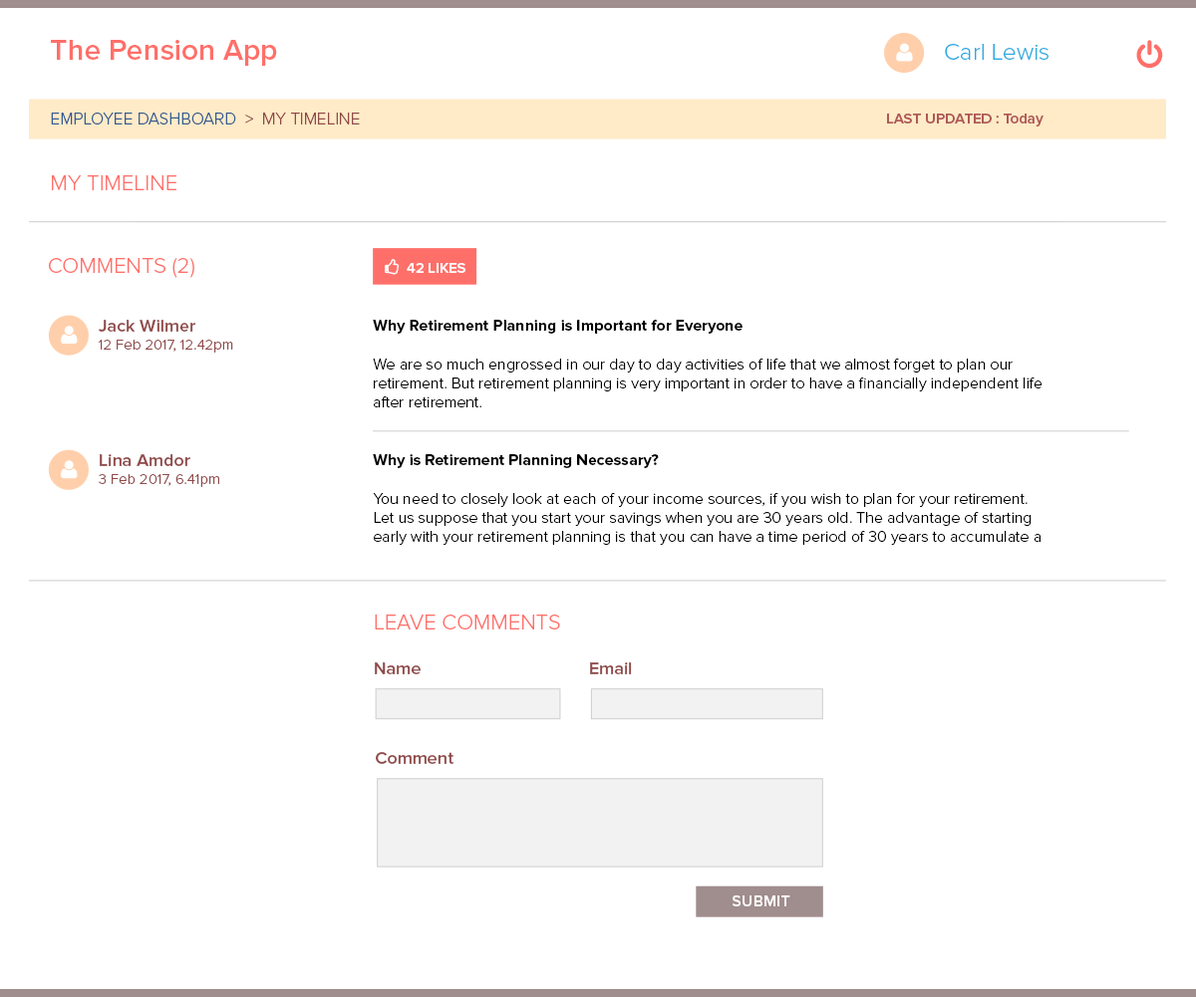
<style>
.page{position:relative;width:1196px;height:997px;background:#ffffff}
.page>*{position:absolute;margin:0}
.t1{font:29.9px "ProximaNova-Semibold";color:#ff6f69}
.t2{font:23.9px "ProximaNova-Light";color:#29abe2}
.t3{font:16.9px "ProximaNova-Light";color:#345b94}
.t4{font:16.9px "ProximaNova-Light";color:#914a4a}
.t5{font:14.9px "ProximaNova-Semibold";color:#af5858}
.t6{font:21.9px "ProximaNova-Light";color:#ff6f69}
.t7{font:14.9px "ProximaNova-Semibold";color:#ffffff}
.t8{font:17.9px "ProximaNova-Semibold";color:#914a4a}
.t9{font:15.9px "ProximaNova-Light";color:#000000}
.t10{font:15.9px "ProximaNova-Bold";color:#000000}
.t11{font:14.9px "ProximaNova-Light";color:#914a4a}
.t12{font:15.9px "ProximaNova-Semibold";color:#ffffff}
</style>
<div class="page">
<p class="t1" style="left:51px;top:40px;width:226px;height:26px">The Pension App</p>
<p class="t2" style="left:945px;top:44px;width:103px;height:16px">Carl Lewis</p>
<p class="t3" style="left:51px;top:113px;width:309px;height:12px">EMPLOYEE DASHBOARD<span class="t4">  &gt;  MY TIMELINE</span></p>
<p class="t5" style="left:887px;top:114px;width:156px;height:13px">LAST UPDATED : Today</p>
<p class="t6" style="left:52px;top:175px;width:124px;height:15px">MY TIMELINE</p>
<p class="t6" style="left:49px;top:258px;width:145px;height:20px">COMMENTS (2)</p>
<p class="t7" style="left:407px;top:263px;width:58px;height:10px">42 LIKES</p>
<p class="t8" style="left:99px;top:320px;width:96px;height:12px">Jack Wilmer</p>
<p class="t9" style="left:373px;top:320px;width:669px;height:88px"><span class="t10">Why Retirement Planning is Important for Everyone<br></span><br>We are so much engrossed in our day to day activities of life that we almost forget to plan our retirement. But retirement planning is very important in order to have a financially independent life after retirement.</p>
<p class="t11" style="left:99px;top:340px;width:134px;height:13px">12 Feb 2017, 12.42pm</p>
<p class="t8" style="left:100px;top:454px;width:90px;height:12px">Lina Amdor</p>
<p class="t9" style="left:373px;top:454px;width:667px;height:91px"><span class="t10">Why is Retirement Planning Necessary?<br></span><br>You need to closely look at each of your income sources, if you wish to plan for your retirement.  Let us suppose that you start your savings when you are 30 years old. The advantage of starting early with your retirement planning is that you can have a time period of 30 years to accumulate a large amount of money for your retirement corpus.  If you will start investing Rs 5,000 every month, then the corpus will grow to Rs 75 lakh (we have assumed a compounded annual growth of 8 percent) by the time you turn out to be 60 years.</p>
<p class="t11" style="left:99px;top:474px;width:120px;height:13px">3 Feb 2017, 6.41pm</p>
<p class="t6" style="left:375px;top:615px;width:185px;height:15px">LEAVE COMMENTS</p>
<p class="t8" style="left:375px;top:663px;width:45px;height:12px">Name</p>
<p class="t8" style="left:590px;top:663px;width:42px;height:12px">Email</p>
<p class="t8" style="left:376px;top:752px;width:77px;height:12px">Comment</p>
<p class="t12" style="left:732px;top:896px;width:58px;height:11px">SUBMIT</p>
</div>
